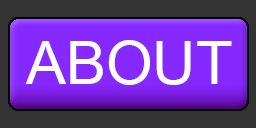
<style>
.page{position:relative;width:256px;height:128px;background:#333333}
.page>*{position:absolute;margin:0}
.t1{font:60px "ArialMT";color:#ffffff}
</style>
<div class="page">
<p class="t1" style="left:25px;top:40px;width:207px;height:45px">ABOUT</p>
</div>
